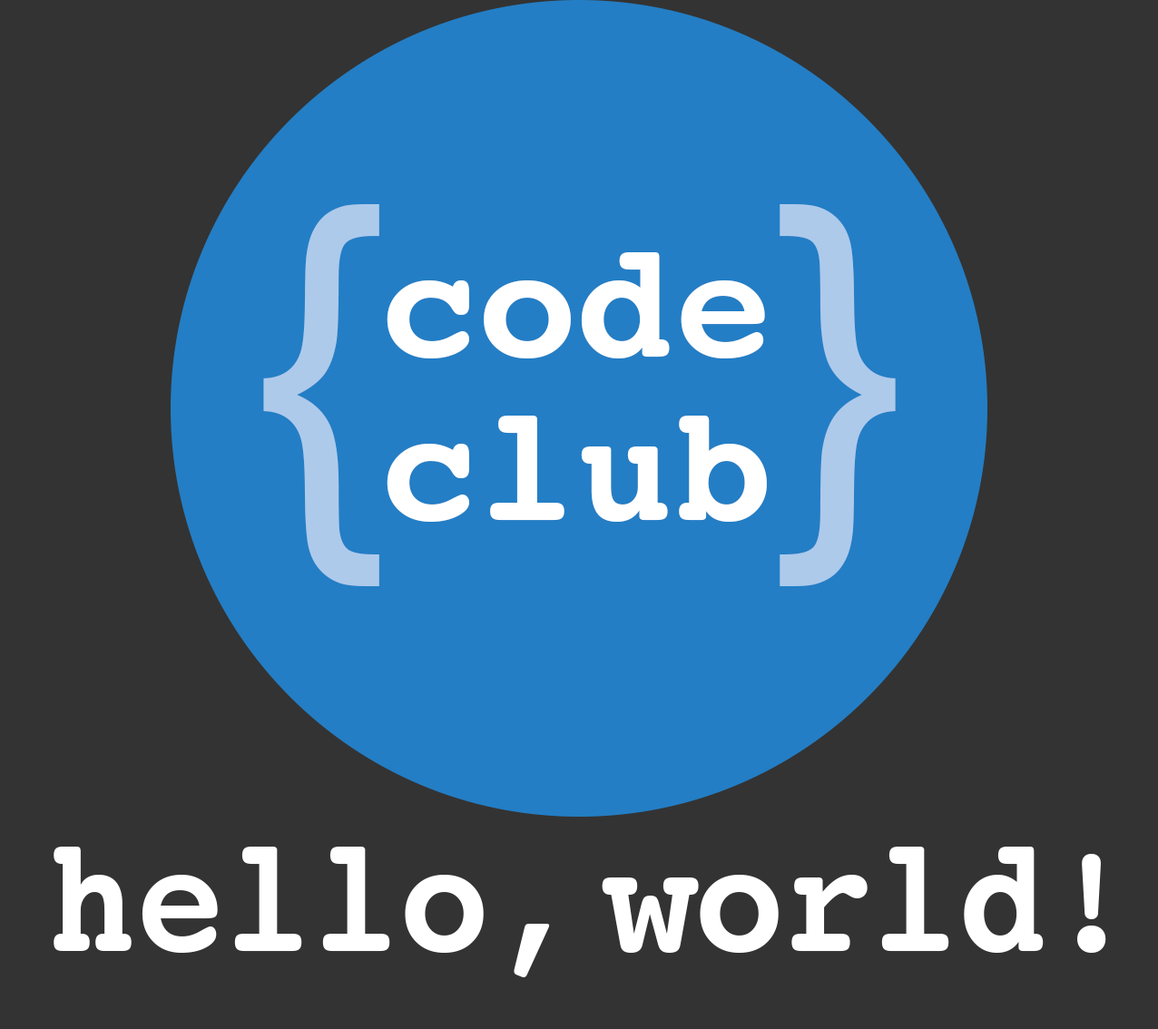
<style>
.page{position:relative;width:1158px;height:1029px;background:#333333}
.page>*{position:absolute;margin:0}
.t1{font:408.5px "ArialMT";color:#adcaeb}
.t2{font:163.4px/163.4px "Courier-Bold";color:#ffffff}
.t3{font:163.4px "Courier-Bold";color:#ffffff;scale:0.9 1}
</style>
<div class="page">
<p class="t1" style="left:263px;top:204px;width:116px;height:382px">{</p>
<p class="t1" style="left:780px;top:204px;width:116px;height:382px">}</p>
<p class="t2" style="left:387px;top:252px;width:380px;height:270px">code<br>club</p>
<p class="t3" style="left:54px;top:847px;width:1053px;height:131px">hello, world!</p>
</div>
